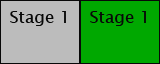
<style>
.page{position:relative;width:160px;height:64px;background:#00a800}
.page>*{position:absolute;margin:0}
.t1{font:17px "LucidaSansUnicode";color:#080808}
</style>
<div class="page">
<p class="t1" style="left:10px;top:11px;width:56px;height:15px">Stage 1</p>
<p class="t1" style="left:90px;top:11px;width:56px;height:15px">Stage 1</p>
</div>
